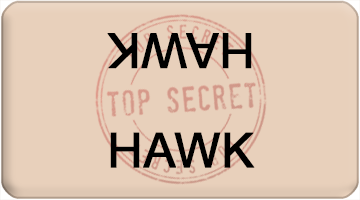
<style>
.page{position:relative;width:360px;height:200px;background:#e8d0bb}
.page>*{position:absolute;margin:0}
.t1{font:48px "ArialMT";color:#000000;font-weight:bold}
</style>
<div class="page">
<p class="t1" style="left:107px;top:33px;width:145px;height:36px;rotate:180deg">HAWK</p>
<p class="t1" style="left:110px;top:132px;width:145px;height:36px">HAWK</p>
</div>
